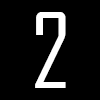
<style>
.page{position:relative;width:100px;height:100px;background:#000000}
.page>*{position:absolute;margin:0}
.t1{font:100px "AgencyFB-Reg";color:#ffffff}
</style>
<div class="page">
<p class="t1" style="left:35px;top:12px;width:31px;height:76px">2</p>
</div>
